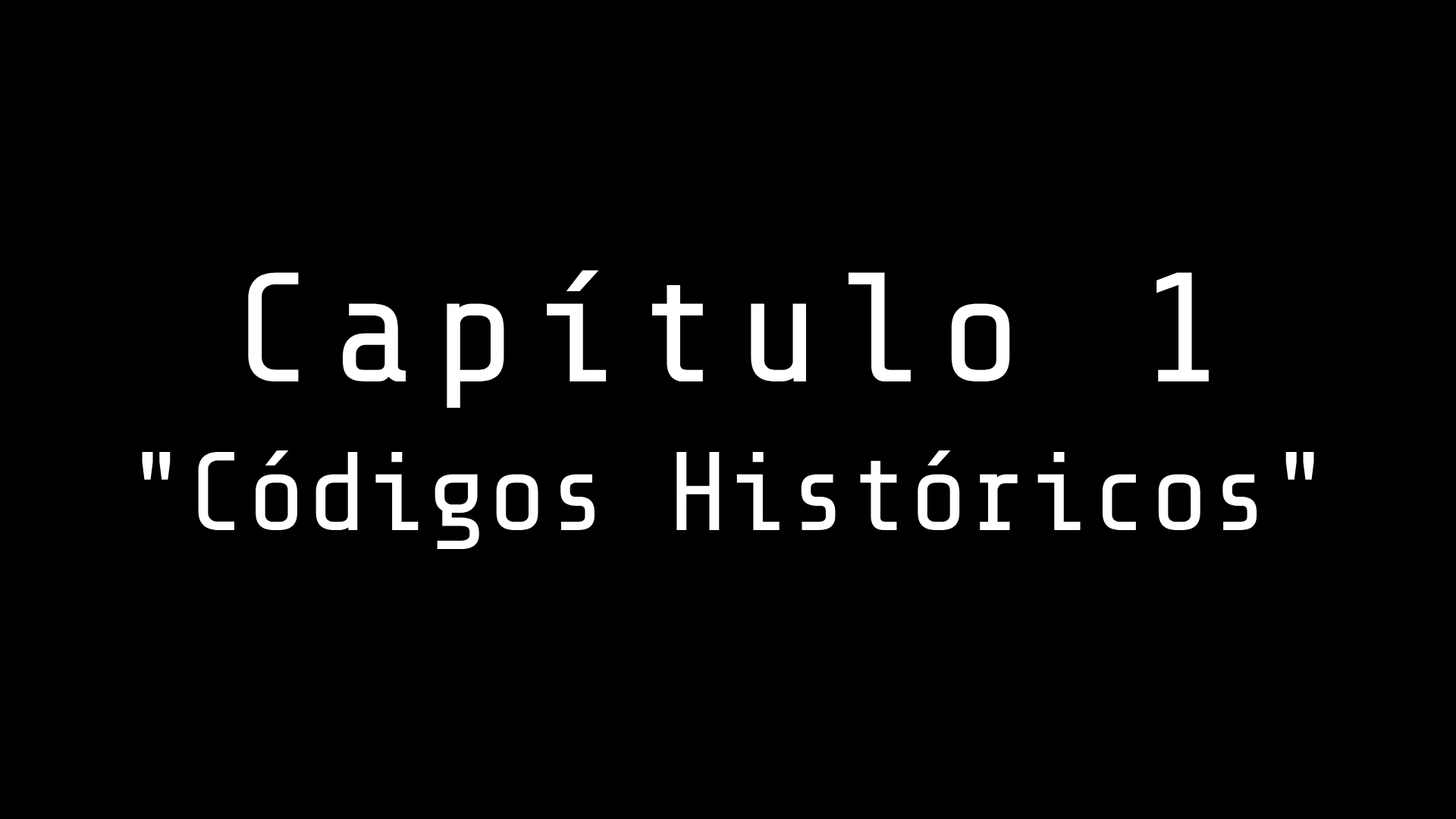
<style>
.page{position:relative;width:1456px;height:819px;background:#000000}
.page>*{position:absolute;margin:0}
.t1{font:111.5px/148.6px "Share-TechMono";color:#ffffff}
.t2{font:155.5px "Share-TechMono";letter-spacing:0.11em;color:#ffffff}
</style>
<div class="page">
<p class="t1" style="left:142px;top:270px;width:1172px;height:279px;text-align:center"><span class="t2">Capítulo 1<br></span>"Códigos Históricos"</p>
</div>
